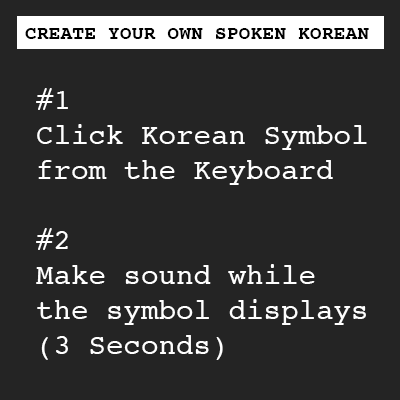
<style>
.page{position:relative;width:400px;height:400px;background:#242424}
.page>*{position:absolute;margin:0}
.t1{font:19.8px "Courier-Bold";color:#000000}
.t2{font:29.2px "Courier";color:#ffffff}
</style>
<div class="page">
<p class="t1" style="left:25px;top:28px;width:344px;height:11px">CREATE YOUR OWN SPOKEN KOREAN</p>
<p class="t2" style="left:36px;top:88px;width:331px;height:272px">#1<br>Click Korean Symbol from the Keyboard<br><br>#2<br>Make sound while the symbol displays<br>(3 Seconds)</p>
</div>
